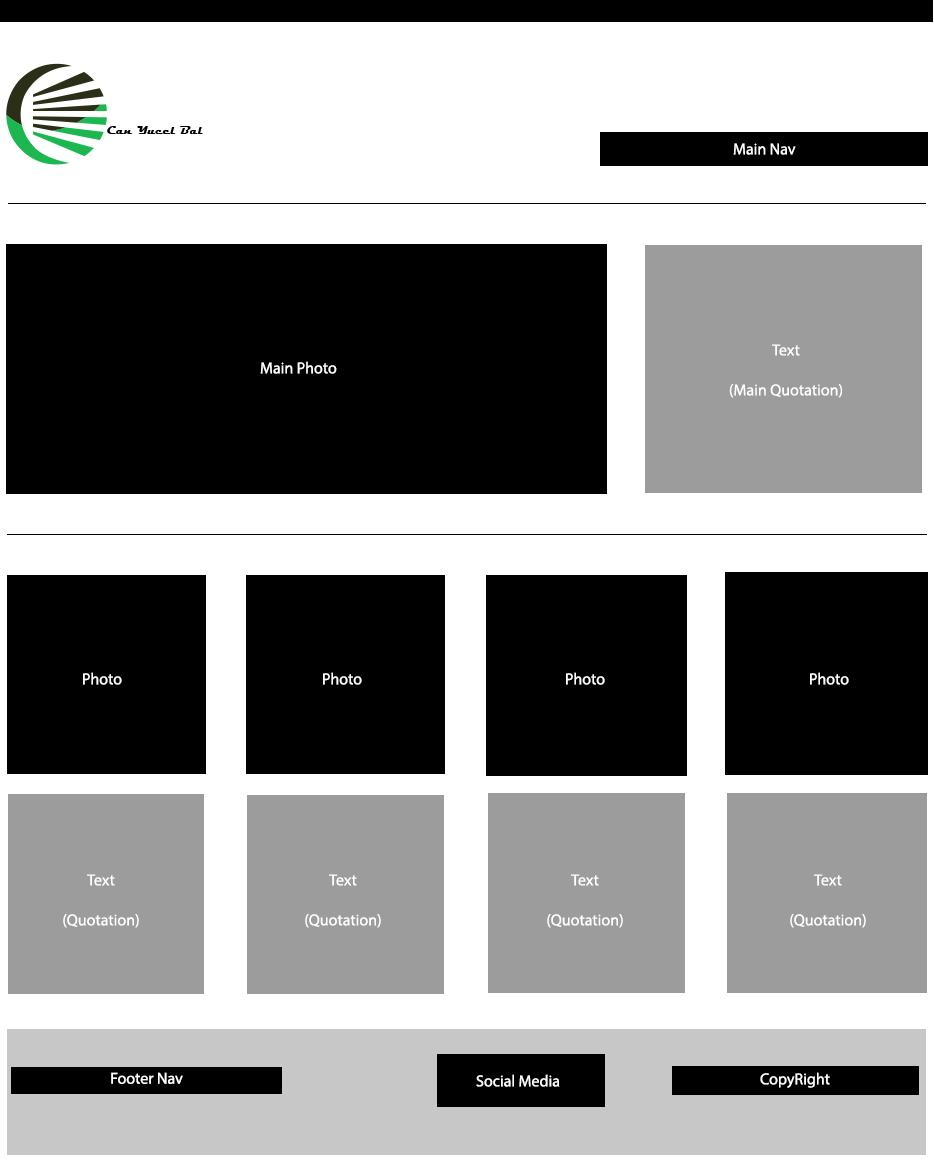
<style>
.page{position:relative;width:934px;height:1161px;background:#ffffff}
.page>*{position:absolute;margin:0}
.t1{font:12px "MyriadPro-Regular";color:#ffffff}
.t2{font:12px/40px "MyriadPro-Regular";color:#ffffff}
</style>
<div class="page">
<p class="t1" style="left:733px;top:143px;width:63px;height:12px">Main Nav</p>
<p class="t2" style="left:729px;top:344px;width:113px;height:54px;text-align:center">Text<br>(Main Quotation)</p>
<p class="t1" style="left:260px;top:361px;width:77px;height:13px">Main Photo</p>
<p class="t1" style="left:83px;top:672px;width:39px;height:13px">Photo</p>
<p class="t1" style="left:323px;top:672px;width:39px;height:13px">Photo</p>
<p class="t1" style="left:566px;top:672px;width:39px;height:13px">Photo</p>
<p class="t1" style="left:810px;top:672px;width:39px;height:13px">Photo</p>
<p class="t2" style="left:63px;top:874px;width:76px;height:54px;text-align:center">Text<br>(Quotation)</p>
<p class="t2" style="left:305px;top:874px;width:76px;height:54px;text-align:center">Text<br>(Quotation)</p>
<p class="t2" style="left:547px;top:874px;width:76px;height:54px;text-align:center">Text<br>(Quotation)</p>
<p class="t2" style="left:790px;top:874px;width:76px;height:54px;text-align:center">Text<br>(Quotation)</p>
<p class="t1" style="left:111px;top:1072px;width:72px;height:12px">Footer Nav</p>
<p class="t1" style="left:760px;top:1072px;width:70px;height:16px">CopyRight</p>
<p class="t1" style="left:476px;top:1074px;width:84px;height:13px">Social Media</p>
</div>
